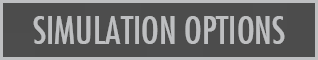
<style>
.page{position:relative;width:318px;height:60px;background:#4c4c4c}
.page>*{position:absolute;margin:0}
.t1{font:37.3px "FuturaCondensed";color:#bebfc1}
</style>
<div class="page">
<p class="t1" style="left:33px;top:16px;width:252px;height:28px">SIMULATION OPTIONS</p>
</div>
